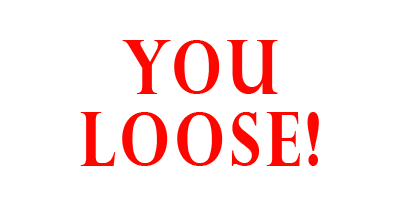
<style>
.page{position:relative;width:400px;height:200px;background:#ffffff}
.page>*{position:absolute;margin:0}
.t1{font:75px "PerpetuaTitlingMT-Bold";letter-spacing:0.09em;color:#fe0600;scale:0.8 1}
</style>
<div class="page">
<p class="t1" style="left:80px;top:40px;width:239px;height:126px">You Loose!</p>
</div>
